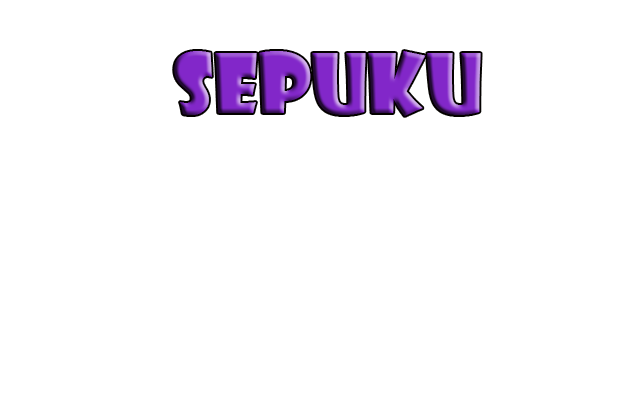
<style>
.page{position:relative;width:640px;height:400px;background:#ffffff}
.page>*{position:absolute;margin:0}
.t1{font:80px "ShowcardGothic-Reg"}
</style>
<div class="page">
<p class="t1" style="left:174px;top:51px;width:307px;height:65px">Sepuku</p>
</div>
